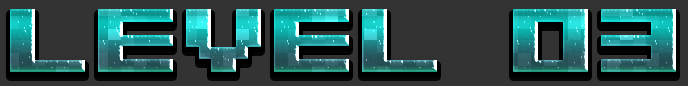
<style>
.page{position:relative;width:688px;height:86px;background:#333333}
.page>*{position:absolute;margin:0}
.t1{font:100px "04b09";text-transform:uppercase}
</style>
<div class="page">
<p class="t1" style="left:10px;top:9px;width:666px;height:63px">LEVEL 03</p>
</div>
